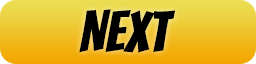
<style>
.page{position:relative;width:256px;height:64px}
.page>*{position:absolute;margin:0}
.t1{font:71.4px "Bangers-Regular";color:#000000}
</style>
<div class="page">
<p class="t1" style="left:79px;top:9px;width:97px;height:44px">Next</p>
</div>
